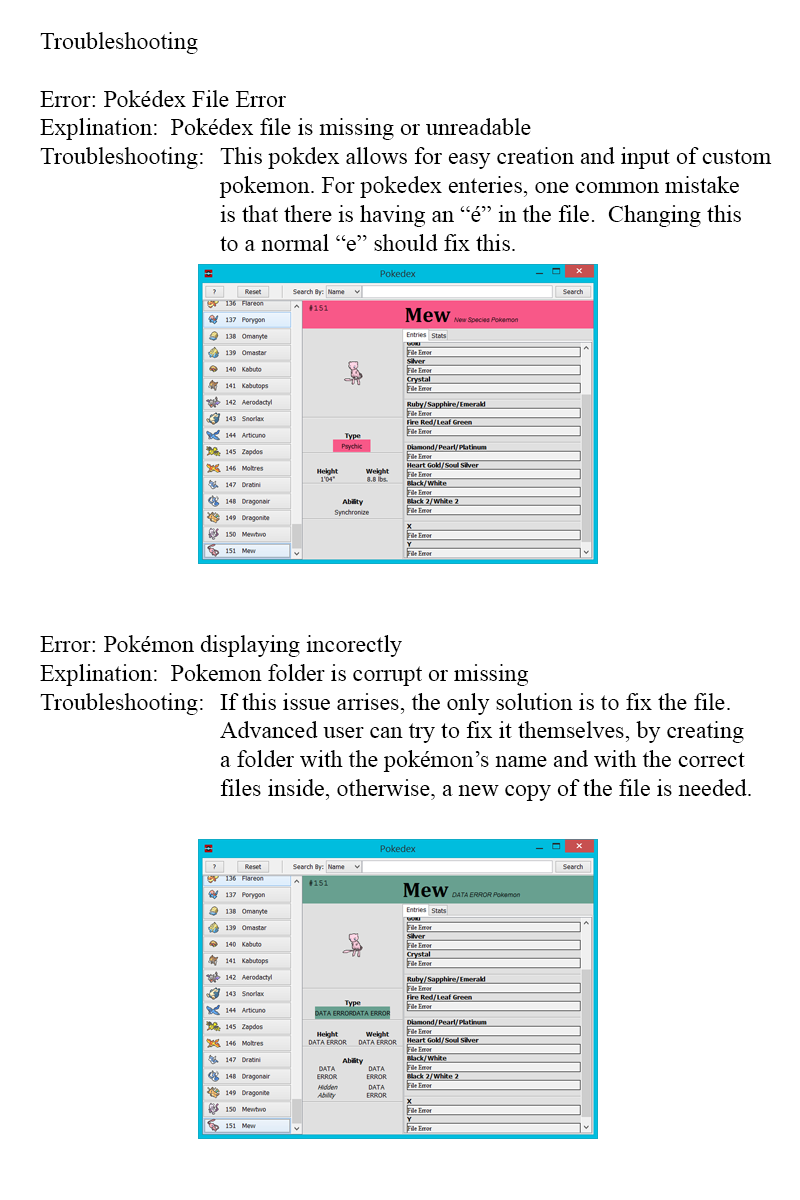
<style>
.page{position:relative;width:800px;height:1200px;background:#ffffff}
.page>*{position:absolute;margin:0}
.t1{font:24px "TimesNewRomanPSMT";color:#000000}
</style>
<div class="page">
<p class="t1" style="left:40px;top:32px;width:732px;height:219px">Troubleshooting<br><br>Error: Pokédex File Error<br>Explination:  Pokédex file is missing or unreadable<br>Troubleshooting:  This pokdex allows for easy creation and input of custom <br>     pokemon. For pokedex enteries, one common mistake<br>      is that there is having an “é” in the file.  Changing this<br>     to a normal “e” should fix this.</p>
<p class="t1" style="left:40px;top:635px;width:711px;height:166px">Error: Pokémon displaying incorectly<br>Explination:  Pokemon folder is corrupt or missing<br>Troubleshooting:  If this issue arrises, the only solution is to fix the file.<br>     Advanced user can try to fix it themselves, by creating<br>     a folder with the pokémon’s name and with the correct<br>     files inside, otherwise, a new copy of the file is needed.</p>
</div>
